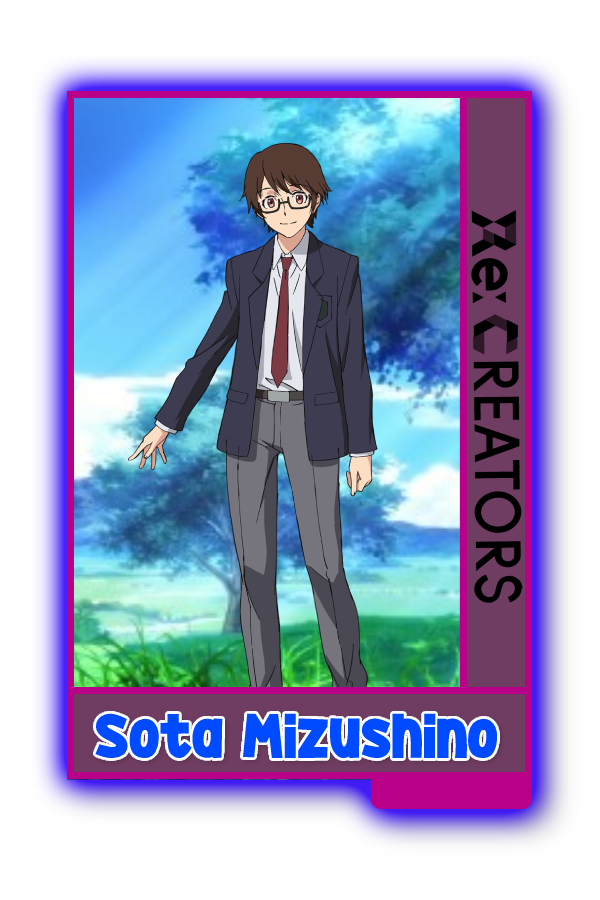
<style>
.page{position:relative;width:600px;height:900px;background:#ffffff}
.page>*{position:absolute;margin:0}
.t1{font:75px "Yokelvision";color:#004bff}
</style>
<div class="page">
<p class="t1" style="left:95px;top:713px;width:403px;height:45px">Sota Mizushino</p>
</div>
